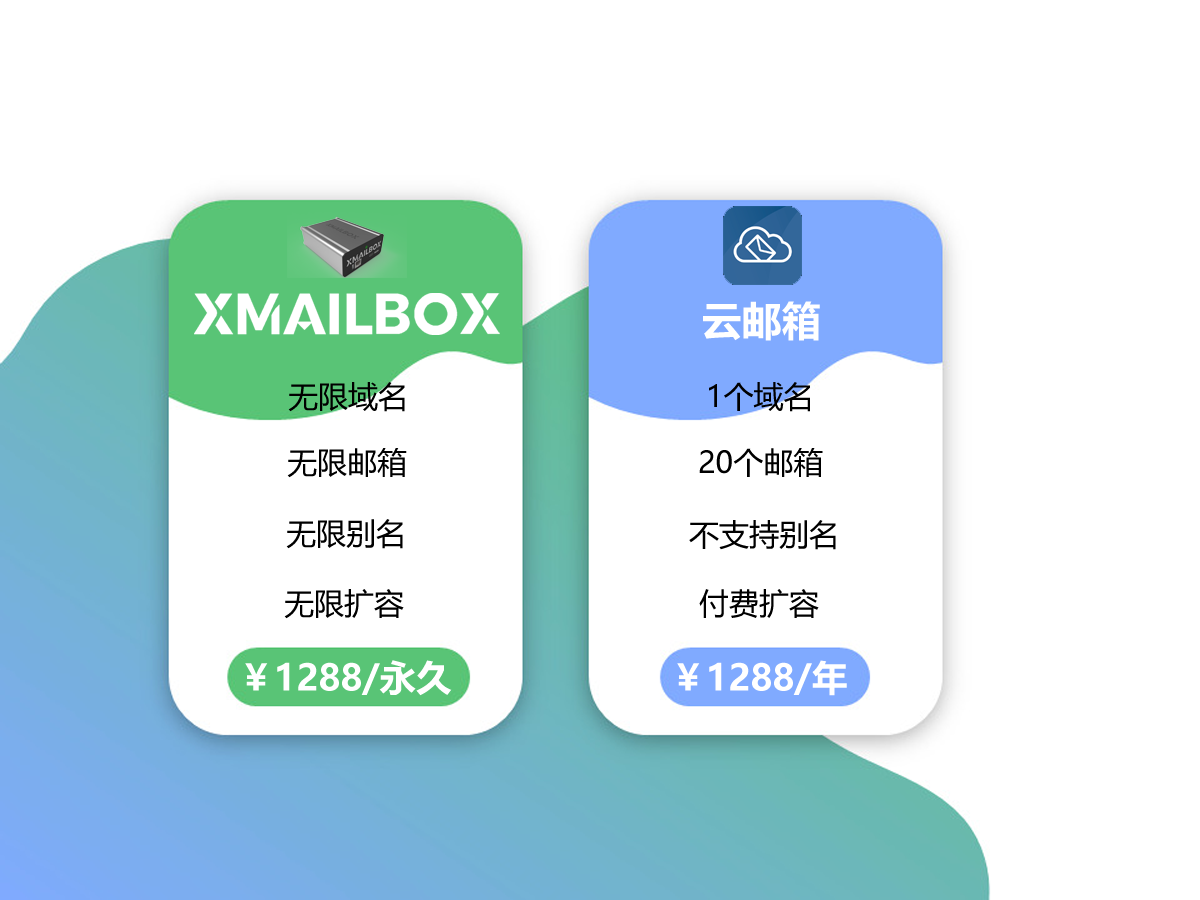
<style>
.page{position:relative;width:1200px;height:900px;background:#ffffff}
.page>*{position:absolute;margin:0}
.t1{font:40px "MicrosoftYaHei-Bold";color:#ffffff}
.t2{font:30px "MicrosoftYaHei";color:#000000}
.t3{font:36px "MicrosoftYaHei-Bold";color:#ffffff}
</style>
<div class="page">
<p class="t1" style="left:703px;top:301px;width:117px;height:40px">云邮箱</p>
<p class="t2" style="left:288px;top:382px;width:117px;height:30px">无限域名</p>
<p class="t2" style="left:709px;top:382px;width:101px;height:30px">1个域名</p>
<p class="t2" style="left:287px;top:448px;width:120px;height:30px">无限邮箱</p>
<p class="t2" style="left:699px;top:448px;width:124px;height:29px">20个邮箱</p>
<p class="t2" style="left:286px;top:519px;width:117px;height:30px">无限别名</p>
<p class="t2" style="left:689px;top:520px;width:147px;height:30px">不支持别名</p>
<p class="t2" style="left:284px;top:589px;width:120px;height:30px">无限扩容</p>
<p class="t2" style="left:699px;top:589px;width:120px;height:29px">付费扩容</p>
<p class="t3" style="left:245px;top:660px;width:207px;height:36px">￥1288/永久</p>
<p class="t3" style="left:677px;top:660px;width:170px;height:36px">￥1288/年</p>
</div>
